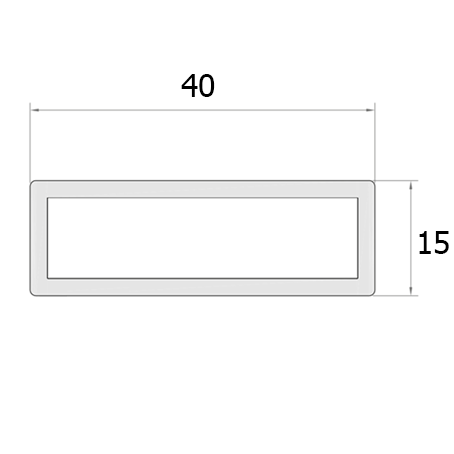
<style>
.page{position:relative;width:454px;height:454px;background:#ffffff}
.page>*{position:absolute;margin:0}
.t1{font:32px "Tahoma";color:#000000}
</style>
<div class="page">
<p class="t1" style="left:181px;top:74px;width:34px;height:23px">40</p>
<p class="t1" style="left:419px;top:231px;width:30px;height:23px">15</p>
</div>
